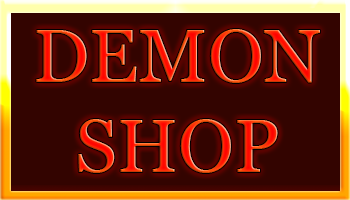
<style>
.page{position:relative;width:350px;height:200px;background:#330400}
.page>*{position:absolute;margin:0}
.t1{font:75px "Vani"}
</style>
<div class="page">
<p class="t1" style="left:36px;top:29px;width:284px;height:144px;text-align:center">DEMON<br>SHOP</p>
</div>
